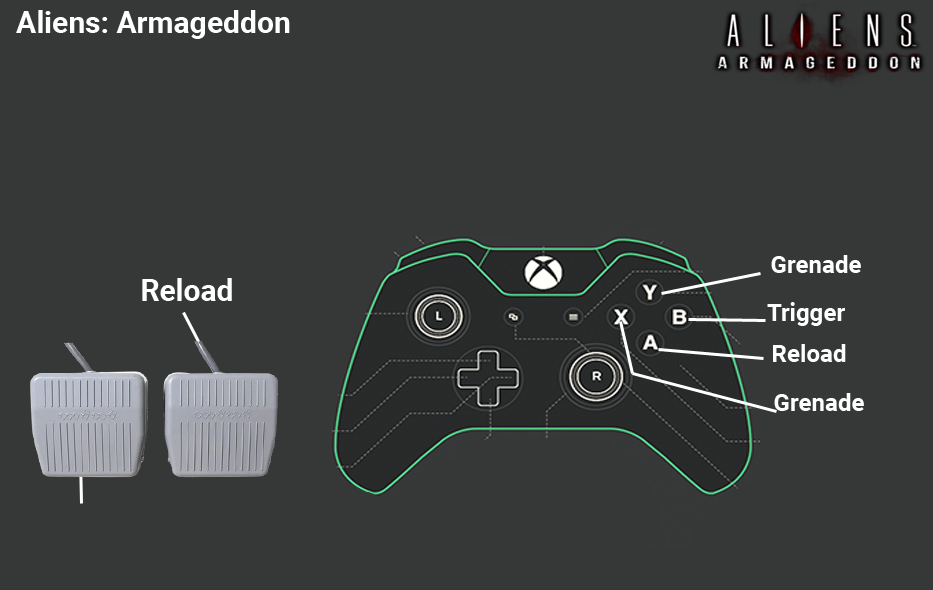
<style>
.page{position:relative;width:933px;height:590px;background:#363838}
.page>*{position:absolute;margin:0}
.t1{font:30px "Roboto-Bold";color:#ffffff}
.t2{font:24px "Roboto-Bold";color:#fefefe}
</style>
<div class="page">
<p class="t1" style="left:16px;top:10px;width:274px;height:29px">Aliens: Armageddon</p>
<p class="t2" style="left:771px;top:255px;width:90px;height:18px">Grenade</p>
<p class="t1" style="left:142px;top:278px;width:90px;height:23px">Reload</p>
<p class="t2" style="left:767px;top:302px;width:78px;height:24px">Trigger</p>
<p class="t2" style="left:773px;top:344px;width:73px;height:18px">Reload</p>
<p class="t2" style="left:774px;top:393px;width:90px;height:18px">Grenade</p>
</div>
